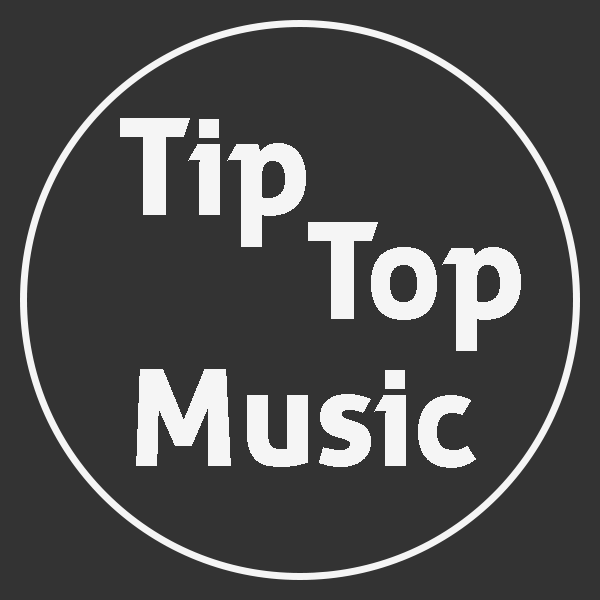
<style>
.page{position:relative;width:600px;height:600px;background:#333333}
.page>*{position:absolute;margin:0}
.t1{font:136px "zwodrei-Bold";color:#f5f5f5}
</style>
<div class="page">
<p class="t1" style="left:120px;top:118px;width:186px;height:129px">Tip</p>
<p class="t1" style="left:308px;top:222px;width:213px;height:129px">Top</p>
<p class="t1" style="left:136px;top:369px;width:340px;height:99px">Music</p>
</div>
